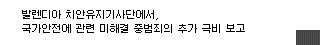
<style>
.page{position:relative;width:320px;height:45px;background:#ffffff}
.page>*{position:absolute;margin:0}
.t1{font:10px/14px "Galmuri9-Regular";color:#000000}
</style>
<div class="page">
<p class="t1" style="left:22px;top:10px;width:223px;height:23px">발렌디아 치안유지기사단에서,<br>국가안전에 관련 미해결 중범죄의 추가 극비 보고</p>
</div>
